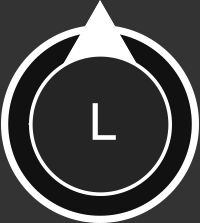
<style>
.page{position:relative;width:200px;height:223px;background:#252525}
.page>*{position:absolute;margin:0}
.t1{font:50.5px "ArialMT";color:#ffffff}
</style>
<div class="page">
<p class="t1" style="left:92px;top:103px;width:24px;height:37px">L</p>
</div>
